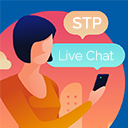
<style>
.page{position:relative;width:128px;height:128px}
.page>*{position:absolute;margin:0}
.t1{font:16px "Raleway-SemiBold";color:#ffffff}
.t2{font:13px "Raleway";color:#ffffff}
</style>
<div class="page">
<p class="t1" style="left:72px;top:17px;width:30px;height:12px">STP</p>
<p class="t2" style="left:59px;top:50px;width:55px;height:11px">Live Chat</p>
</div>
